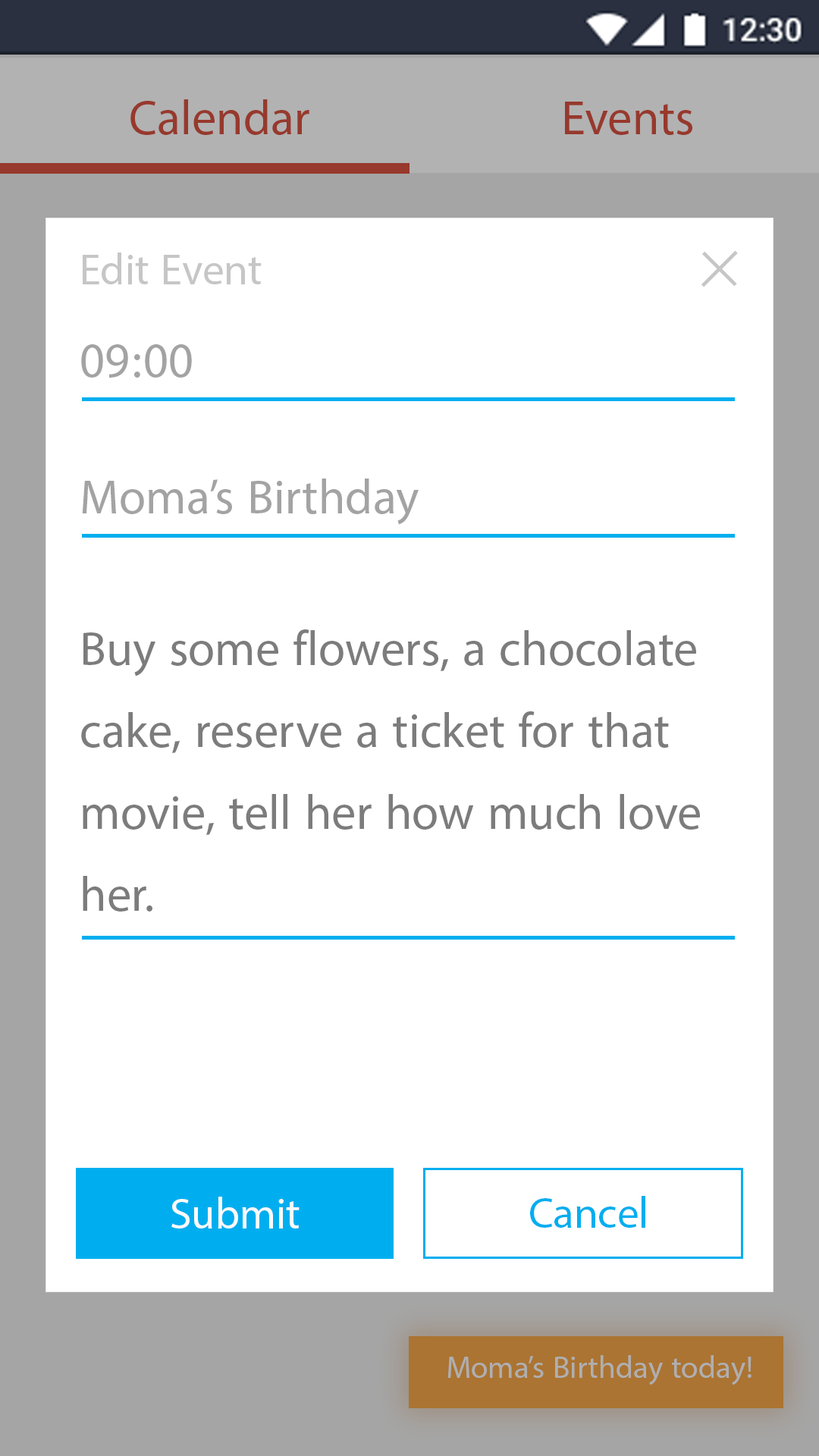
<style>
.page{position:relative;width:819px;height:1456px;background:#ffffff}
.page>*{position:absolute;margin:0}
.t1{font:68.2px "MyriadArabic-Regular";color:#97392d}
.t2{font:60.7px "MyriadArabic-Regular";color:#c6c6c6}
.t3{font:111.5px "BaskOldFace";color:#c6c6c6}
.t4{font:68.2px "MyriadArabic-Regular";color:#a3a3a3}
.t5{font:68.2px "MyriadArabic-Regular";color:#7c7c7c}
.t6{font:60.7px "MyriadArabic-Regular";color:#fffafa}
.t7{font:60.7px "MyriadArabic-Regular";color:#00aeef}
.t8{font:43.8px "MyriadArabic-Regular";color:#afafaf}
</style>
<div class="page">
<p class="t1" style="left:130px;top:99px;width:179px;height:36px">Calendar</p>
<p class="t1" style="left:565px;top:102px;width:127px;height:33px">Events</p>
<p class="t2" style="left:83px;top:253px;width:179px;height:31px">Edit Event</p>
<p class="t3" style="left:701px;top:250px;width:37px;height:37px;rotate:-45deg">+</p>
<p class="t4" style="left:81px;top:344px;width:111px;height:34px">09:00</p>
<p class="t4" style="left:82px;top:479px;width:337px;height:46px">Moma’s Birthday</p>
<p class="t5" style="left:81px;top:629px;width:619px;height:283px;text-align:justify">Buy some flowers, a chocolate<br>cake, reserve a ticket for that<br>movie, tell her how much love<br>her.</p>
<p class="t6" style="left:171px;top:1197px;width:129px;height:31px">Submit</p>
<p class="t7" style="left:530px;top:1196px;width:115px;height:32px">Cancel</p>
<p class="t8" style="left:447px;top:1355px;width:304px;height:30px">Moma’s Birthday today!</p>
</div>
